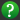
<style>
.page{position:relative;width:20px;height:20px;background:#333333}
.page>*{position:absolute;margin:0}
.t1{font:18px "Georgia";color:#ffffff}
</style>
<div class="page">
<p class="t1" style="left:6px;top:4px;width:8px;height:13px">?</p>
</div>
